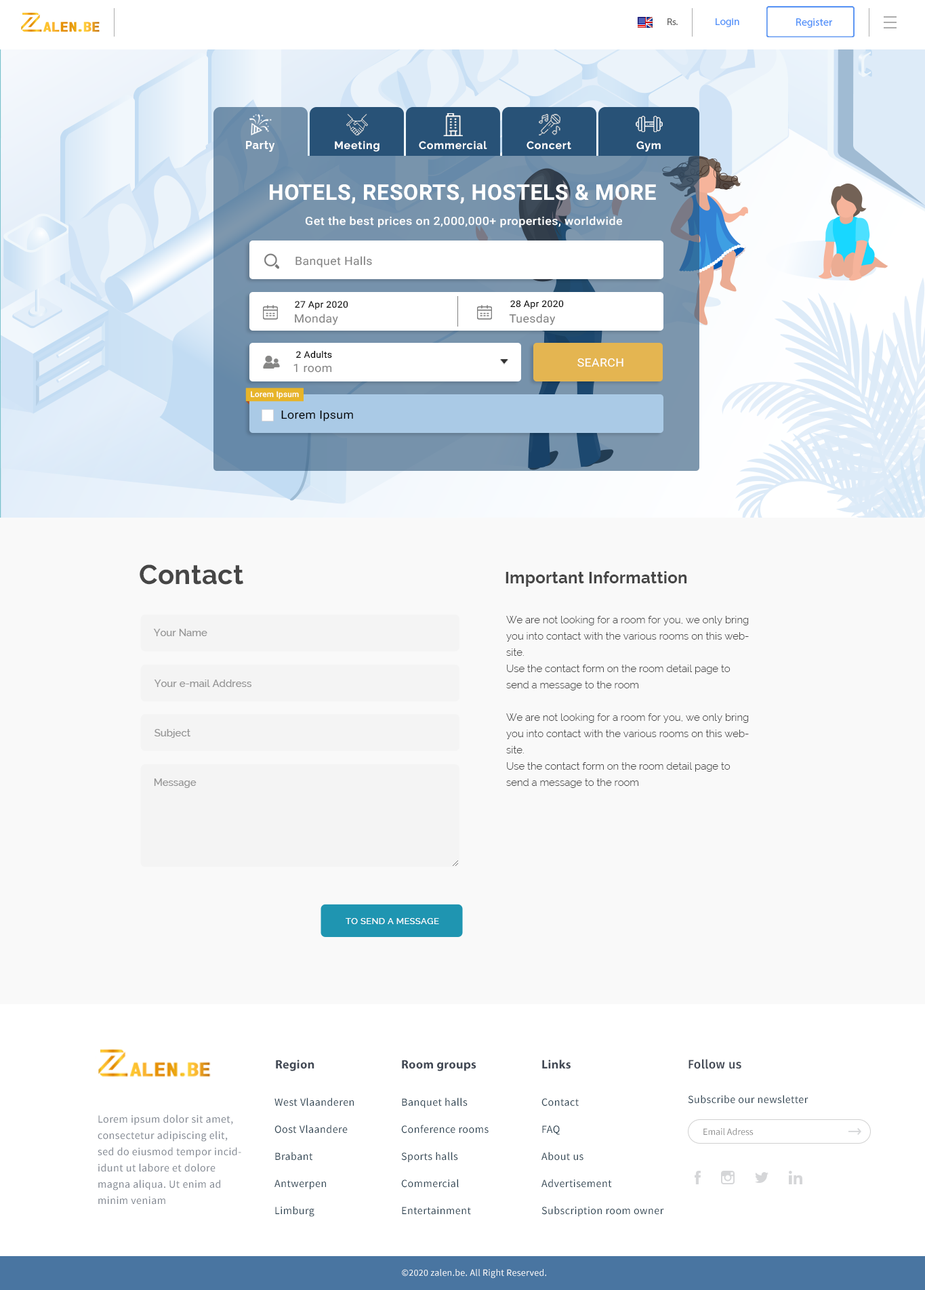
<style>
.page{position:relative;width:925px;height:1290px;background:#f9f9f9}
.page>*{position:absolute;margin:0}
.t1{font:9.6px "MyriadPro-Regular";color:#636363;scale:1.04 1}
.t2{font:9.9px "MyriadPro-Regular";color:#5392f9;scale:1.07 1}
.t3{font:10.8px "MyriadPro-Regular";color:#5392f9}
.t4{font:8.1px "Raleway-Bold";letter-spacing:0.05em;color:#ffffff}
.t5{font:21.7px "Roboto-Bold";letter-spacing:0.02em;color:#ffffff}
.t6{font:11.4px "Roboto-Medium";letter-spacing:0.02em;color:#ffffff;scale:1.07 1}
.t7{font:11.4px "Roboto-Regular";letter-spacing:0.02em;color:#818181;scale:1.06 1}
.t8{font:9px "Roboto-Regular";letter-spacing:0.02em;color:#000000;scale:1.06 1}
.t9{font:11.4px "Roboto-Regular";letter-spacing:0.02em;color:#ffffff;scale:1.06 1}
.t10{font:8px "Roboto-Medium";letter-spacing:0.02em;color:#ffffff}
.t11{font:11.4px "Roboto-Regular";letter-spacing:0.02em;color:#000000;scale:1.06 1}
.t12{font:27.1px "Raleway-Bold";letter-spacing:0.01em;color:#464646}
.t13{font:16.3px "Raleway-Bold";letter-spacing:0.01em;color:#464646}
.t14{font:9.9px/16.3px "Raleway-Light";letter-spacing:0.01em;color:#464646}
.t15{font:9.9px "Raleway-Medium";letter-spacing:0.01em;color:#969696}
.t16{font:9px "Raleway-Medium";letter-spacing:0.01em;color:#ffffff}
.t17{font:12.2px "MyriadPro-Bold";letter-spacing:0.02em;color:#424955}
.t18{font:12.2px "FiraSans-Medium";letter-spacing:0.02em;color:#424955}
.t19{font:10.8px/27.1px "SourceSansPro-Regular";letter-spacing:0.03em;color:#2e4453}
.t20{font:10.8px "SourceSansPro-Regular";letter-spacing:0.03em;color:#2e4453}
.t21{font:10.8px/16.3px "SourceSansPro-Regular";letter-spacing:0.03em;color:#818791}
.t22{font:9.5px "SourceSansPro-Regular";color:#8c8c8c}
.t23{font:9.5px "SourceSansPro-Regular";letter-spacing:0.02em;color:#ffffff}
</style>
<div class="page">
<p class="t1" style="left:667px;top:18px;width:10px;height:7px">Rs.</p>
<p class="t2" style="left:715px;top:18px;width:24px;height:9px">Login</p>
<p class="t3" style="left:796px;top:18px;width:36px;height:10px">Register</p>
<p class="t4" style="left:246px;top:141px;width:29px;height:11px">Party</p>
<p class="t4" style="left:335px;top:141px;width:44px;height:11px">Meeting</p>
<p class="t4" style="left:419px;top:141px;width:68px;height:9px">Commercial</p>
<p class="t4" style="left:526px;top:141px;width:45px;height:9px">Concert</p>
<p class="t4" style="left:636px;top:141px;width:24px;height:11px">Gym</p>
<p class="t5" style="left:270px;top:184px;width:386px;height:20px">HOTELS, RESORTS, HOSTELS &amp; MORE</p>
<p class="t6" style="left:305px;top:216px;width:317px;height:12px">Get the best prices on 2,000,000+ properties, worldwide</p>
<p class="t7" style="left:295px;top:256px;width:77px;height:12px">Banquet Halls</p>
<p class="t8" style="left:295px;top:301px;width:53px;height:9px">27 Apr 2020</p>
<p class="t8" style="left:510px;top:300px;width:54px;height:9px">28 Apr 2020</p>
<p class="t7" style="left:295px;top:314px;width:43px;height:11px">Monday</p>
<p class="t7" style="left:509px;top:314px;width:46px;height:11px">Tuesday</p>
<p class="t8" style="left:296px;top:350px;width:36px;height:8px">2 Adults</p>
<p class="t7" style="left:293px;top:364px;width:39px;height:9px">1 room</p>
<p class="t9" style="left:577px;top:358px;width:46px;height:9px">SEARCH</p>
<p class="t10" style="left:251px;top:391px;width:48px;height:8px">Lorem Ipsum</p>
<p class="t11" style="left:281px;top:410px;width:72px;height:11px">Lorem Ipsum</p>
<p class="t12" style="left:140px;top:564px;width:103px;height:21px">Contact</p>
<p class="t13" style="left:505px;top:571px;width:182px;height:16px">Important Informattion</p>
<p class="t14" style="left:506px;top:616px;width:242px;height:172px">We are not looking for a room for you, we only bring you into contact with the various rooms on this website.<br>Use the contact form on the room detail page to send a message to the room<br><br>We are not looking for a room for you, we only bring you into contact with the various rooms on this website.<br>Use the contact form on the room detail page to send a message to the room</p>
<p class="t15" style="left:153px;top:629px;width:54px;height:7px">Your Name</p>
<p class="t15" style="left:154px;top:679px;width:97px;height:8px">Your e-mail Address</p>
<p class="t15" style="left:154px;top:729px;width:36px;height:9px">Subject</p>
<p class="t15" style="left:154px;top:778px;width:42px;height:10px">Message</p>
<p class="t16" style="left:345px;top:918px;width:94px;height:6px">TO SEND A MESSAGE</p>
<p class="t17" style="left:276px;top:1059px;width:38px;height:12px">Region</p>
<p class="t17" style="left:402px;top:1059px;width:74px;height:12px">Room groups</p>
<p class="t17" style="left:542px;top:1059px;width:28px;height:10px">Links</p>
<p class="t18" style="left:688px;top:1059px;width:53px;height:10px">Follow us</p>
<p class="t19" style="left:274px;top:1097px;width:80px;height:120px">West Vlaanderen<br>Oost Vlaandere<br>Brabant<br>Antwerpen<br>Limburg</p>
<p class="t19" style="left:401px;top:1097px;width:87px;height:117px">Banquet halls<br>Conference rooms<br>Sports halls<br>Commercial<br>Entertainment</p>
<p class="t19" style="left:541px;top:1098px;width:123px;height:119px">Contact<br>FAQ<br>About us<br>Advertisement<br>Subscription room owner</p>
<p class="t20" style="left:688px;top:1095px;width:120px;height:8px">Subscribe our newsletter</p>
<p class="t21" style="left:98px;top:1114px;width:143px;height:90px">Lorem ipsum dolor sit amet, consectetur adipiscing elit, sed do eiusmod tempor incididunt ut labore et dolore magna aliqua. Ut enim ad minim veniam</p>
<p class="t22" style="left:703px;top:1128px;width:50px;height:7px">Email Adress</p>
<p class="t23" style="left:402px;top:1269px;width:144px;height:9px">©2020 zalen.be. All Right Reserved.</p>
</div>
